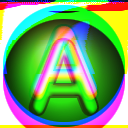
<style>
.page{position:relative;width:128px;height:128px}
.page>*{position:absolute;margin:0}
.t1{font:100px "ArialRoundedMTBold"}
</style>
<div class="page">
<p class="t1" style="left:30px;top:24px;width:68px;height:74px">A</p>
</div>
